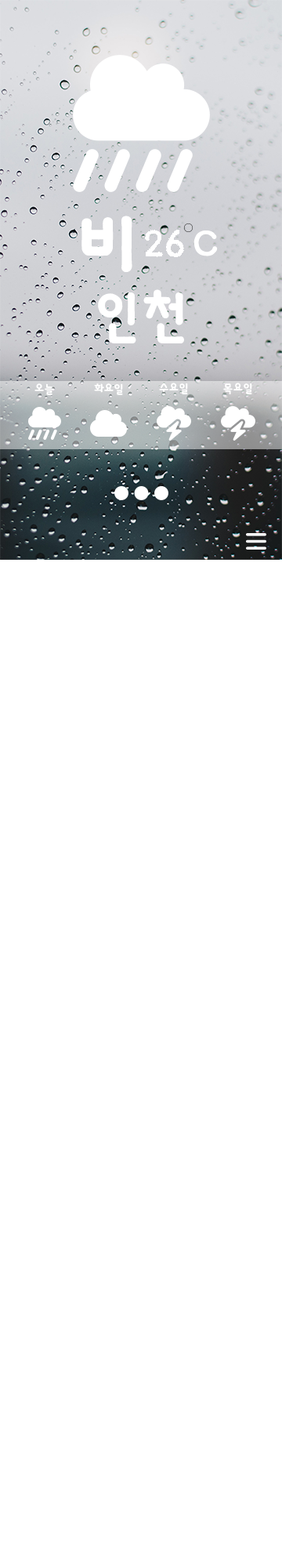
<style>
.page{position:relative;width:282px;height:1568px;background:#ffffff}
.page>*{position:absolute;margin:0}
.t1{font:78.4px "HaanBaekjeB";color:#ffffff}
.t2{font:35.3px "HaanBaekjeB";color:#ffffff}
.t3{font:54.9px "HaanBaekjeB";color:#ffffff}
.t4{font:11.8px "HaanBaekjeB";color:#ffffff}
</style>
<div class="page">
<p class="t1" style="left:82px;top:216px;width:50px;height:56px">비</p>
<p class="t2" style="left:145px;top:229px;width:39px;height:28px">26</p>
<p class="t2" style="left:194px;top:230px;width:24px;height:26px">C</p>
<p class="t3" style="left:98px;top:289px;width:86px;height:54px">인천</p>
<p class="t4" style="left:34px;top:383px;width:20px;height:12px">오늘</p>
<p class="t4" style="left:94px;top:383px;width:29px;height:12px">화요일</p>
<p class="t4" style="left:159px;top:383px;width:29px;height:11px">수요일</p>
<p class="t4" style="left:223px;top:383px;width:29px;height:11px">목요일</p>
</div>
